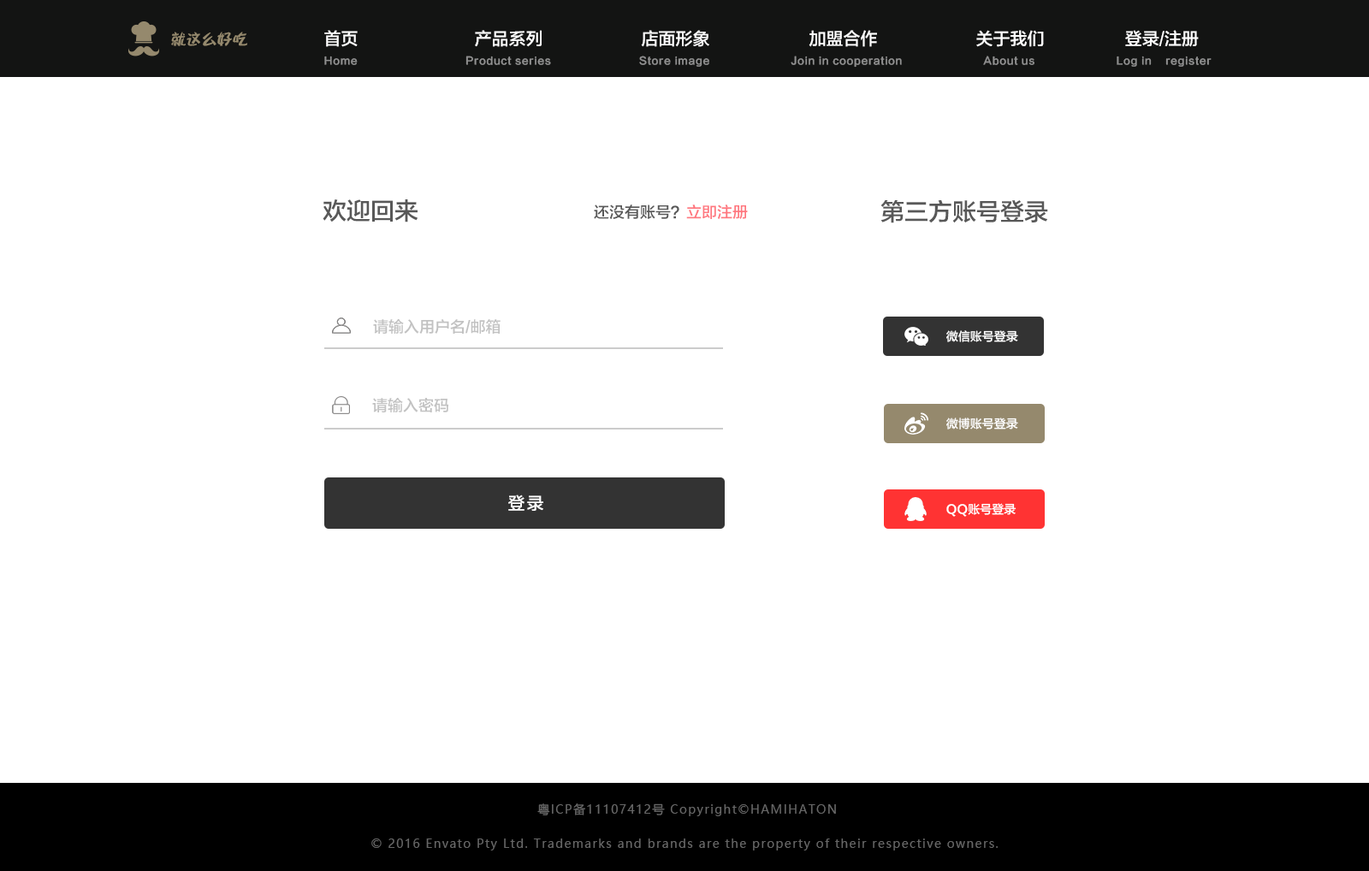
<style>
.page{position:relative;width:1369px;height:871px;background:#ffffff}
.page>*{position:absolute;margin:0}
.t1{font:17.1px "FZLTZHK--GBK1-0";color:#ffffff}
.t2{font:15.4px "DFPBuDingW12";color:#95896d}
.t3{font:10.3px "FZLTZHK--GBK1-0";letter-spacing:0.05em;color:#919191}
.t4{font:24px "FZLTZHK--GBK1-0";color:#585858}
.t5{font:15.4px "FZLTZHK--GBK1-0"}
.t6{font:15.4px "FZLTZHK--GBK1-0";color:#c2c2c2}
.t7{font:12px "FZLTZHK--GBK1-0";color:#ffffff}
.t8{font:17.1px "FZLTZHK--GBK1-0";letter-spacing:0.1em;color:#ffffff}
.t9{font:12px "MicrosoftYaHei";letter-spacing:0.1em;color:#676767}
</style>
<div class="page">
<p class="t1" style="left:324px;top:30px;width:34px;height:17px">首页</p>
<p class="t1" style="left:475px;top:30px;width:67px;height:17px">产品系列</p>
<p class="t1" style="left:641px;top:30px;width:68px;height:17px">店面形象</p>
<p class="t1" style="left:809px;top:30px;width:68px;height:17px">加盟合作</p>
<p class="t1" style="left:976px;top:30px;width:68px;height:17px">关于我们</p>
<p class="t1" style="left:1125px;top:30px;width:74px;height:17px">登录/注册</p>
<p class="t2" style="left:171px;top:32px;width:76px;height:14px">就这么好吃</p>
<p class="t3" style="left:324px;top:56px;width:888px;height:12px">Home                                Product series                          Store image                        Join in cooperation                        About us                        Log in    register</p>
<p class="t4" style="left:323px;top:199px;width:95px;height:23px">欢迎回来</p>
<p class="t5" style="left:594px;top:204px;width:154px;height:15px">还没有账号？立即注册</p>
<p class="t4" style="left:880px;top:199px;width:168px;height:24px">第三方账号登录</p>
<p class="t6" style="left:373px;top:319px;width:128px;height:15px">请输入用户名/邮箱</p>
<p class="t7" style="left:946px;top:330px;width:72px;height:12px">微信账号登录</p>
<p class="t6" style="left:372px;top:398px;width:76px;height:14px">请输入密码</p>
<p class="t7" style="left:946px;top:418px;width:72px;height:12px">微博账号登录</p>
<p class="t8" style="left:508px;top:495px;width:35px;height:16px">登录</p>
<p class="t7" style="left:946px;top:503px;width:70px;height:14px">QQ账号登录</p>
<p class="t9" style="left:537px;top:803px;width:299px;height:13px">粤ICP备11107412号 Copyright©HAMIHATON</p>
<p class="t9" style="left:371px;top:839px;width:627px;height:11px">© 2016 Envato Pty Ltd. Trademarks and brands are the property of their respective owners.</p>
</div>
